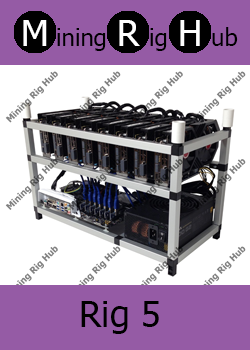
<style>
.page{position:relative;width:250px;height:350px;background:#955ba5}
.page>*{position:absolute;margin:0}
.t1{font:36px "Tahoma";color:#ffffff}
.t2{font:24px "Tahoma";color:#000000}
.t3{font:36px "Tahoma";color:#000000}
</style>
<div class="page">
<p class="t1" style="left:23px;top:20px;width:24px;height:26px">M</p>
<p class="t2" style="left:57px;top:28px;width:49px;height:23px">ining</p>
<p class="t1" style="left:119px;top:20px;width:21px;height:26px">R</p>
<p class="t2" style="left:150px;top:28px;width:17px;height:23px">ig</p>
<p class="t1" style="left:180px;top:20px;width:20px;height:26px">H</p>
<p class="t2" style="left:212px;top:27px;width:26px;height:19px">ub</p>
<p class="t3" style="left:81px;top:301px;width:78px;height:33px">Rig 5</p>
</div>
